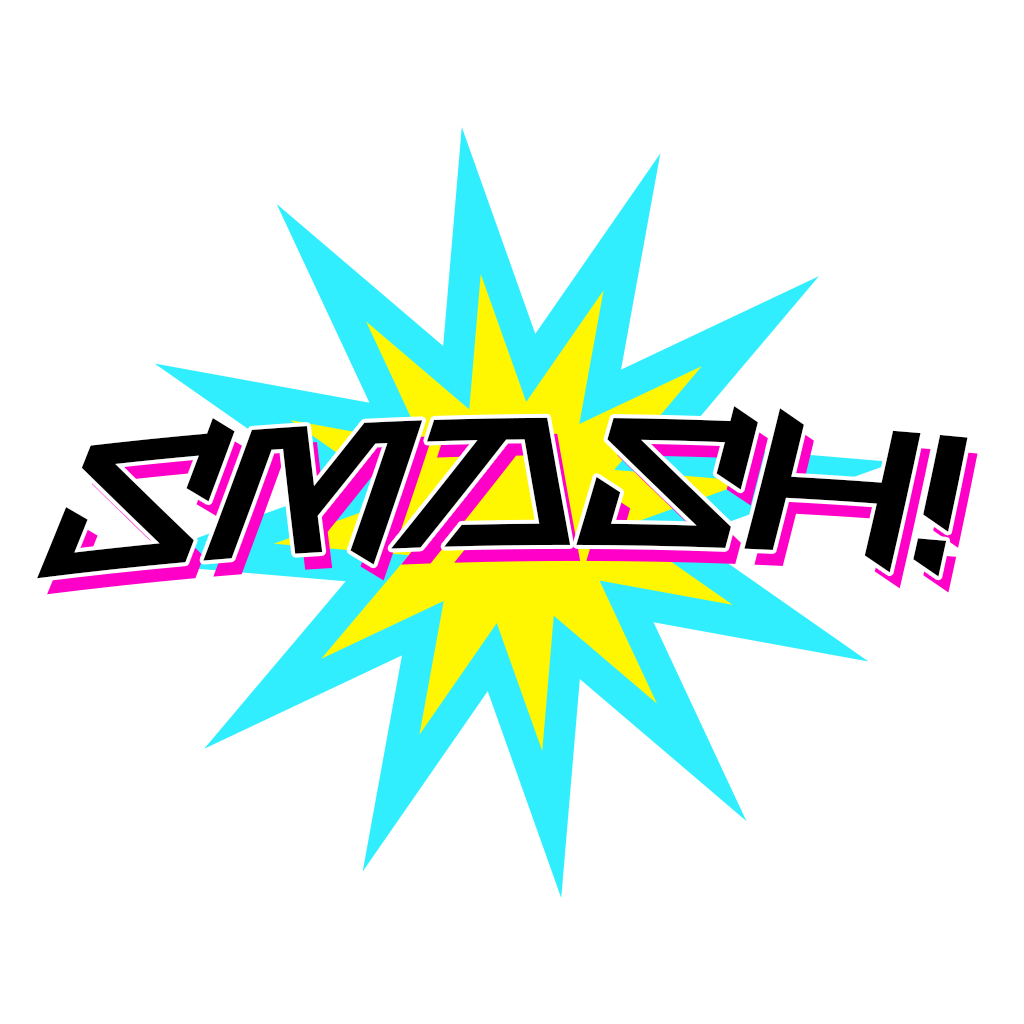
<style>
.page{position:relative;width:1024px;height:1024px;background:#ffffff}
.page>*{position:absolute;margin:0}
.t1{font:218.7px "CybassassinRegular";color:#000000}
</style>
<div class="page">
<p class="t1" style="left:37px;top:406px;width:931px;height:173px">SMASH!</p>
</div>
